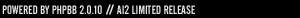
<style>
.page{position:relative;width:300px;height:18px;background:#000000}
.page>*{position:absolute;margin:0}
.t1{font:12px "AlternateGothicNo2BT-Regular";color:#e5e5e5;text-transform:uppercase}
.t2{font:12px "AlternateGothicNo2BT-Regular";color:#e5e5e5;text-transform:uppercase;font-weight:bold}
</style>
<div class="page">
<p class="t1" style="left:2px;top:5px;width:100px;height:9px">powered by phpbb 2.0.10</p>
<p class="t2" style="left:105px;top:4px;width:9px;height:11px">//</p>
<p class="t1" style="left:117px;top:5px;width:78px;height:9px">ai2 limited release</p>
</div>
